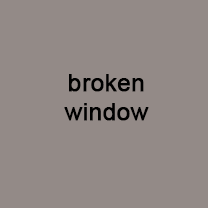
<style>
.page{position:relative;width:208px;height:208px;background:#938a87}
.page>*{position:absolute;margin:0}
.t1{font:24px "ArialMT";color:#000000;font-weight:bold}
</style>
<div class="page">
<p class="t1" style="left:64px;top:74px;width:85px;height:47px;text-align:center">broken<br>window</p>
</div>
